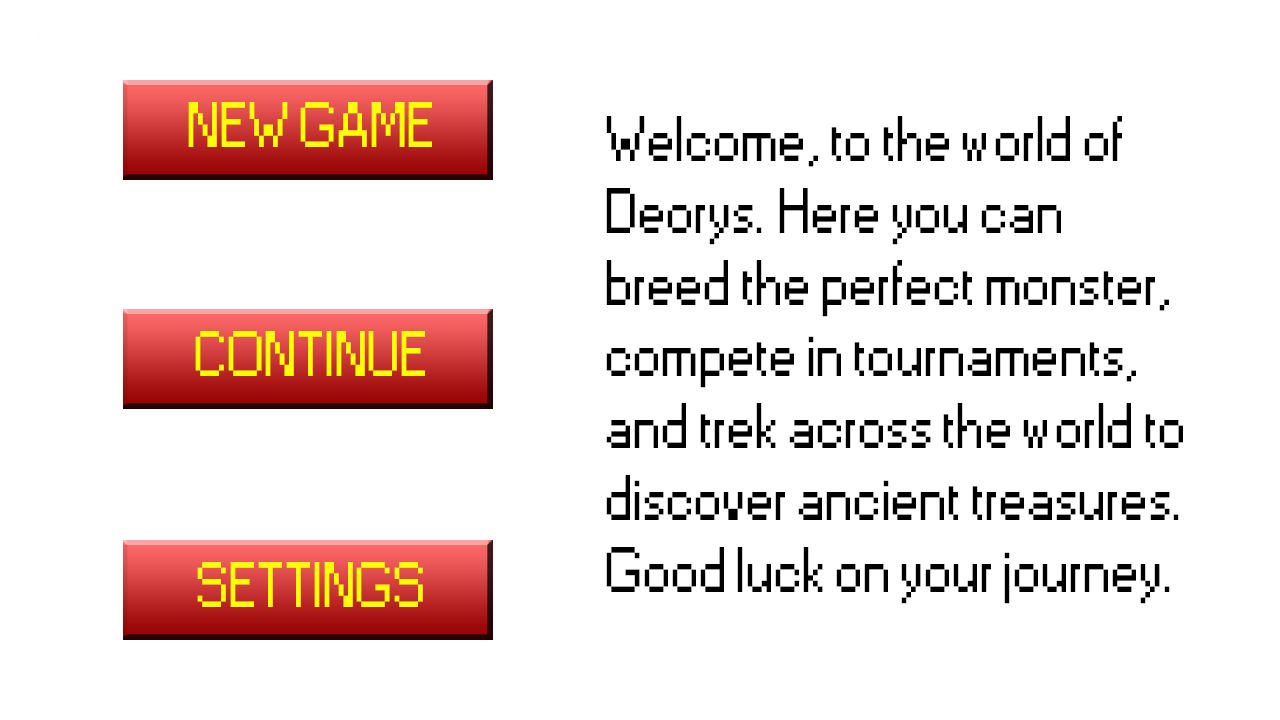
<style>
.page{position:relative;width:1280px;height:720px;background:#ffffff}
.page>*{position:absolute;margin:0}
.t1{font:60px "Small Fonts";color:#ffff00}
.t2{font:60px "Small Fonts";color:#000000}
</style>
<div class="page">
<p class="t1" style="left:188px;top:102px;width:244px;height:45px">NEW GAME</p>
<p class="t2" style="left:606px;top:116px;width:577px;height:488px">Welcome, to the world of<br>Deorys. Here you can<br>breed the perfect monster,<br>compete in tournaments,<br>and trek across the world to<br>discover ancient treasures.<br>Good luck on your journey.</p>
<p class="t1" style="left:195px;top:331px;width:230px;height:45px">CONTINUE</p>
<p class="t1" style="left:197px;top:562px;width:226px;height:45px">SETTINGS</p>
</div>
